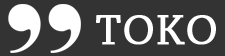
<style>
.page{position:relative;width:225px;height:56px;background:#333333}
.page>*{position:absolute;margin:0}
.t1{font:43.5px "ChaparralPro-Regular";letter-spacing:0.02em;color:#ffffff;font-weight:bold}
</style>
<div class="page">
<p class="t1" style="left:96px;top:15px;width:120px;height:30px">TOKO</p>
</div>
